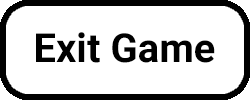
<style>
.page{position:relative;width:250px;height:100px;background:#ffffff}
.page>*{position:absolute;margin:0}
.t1{font:40px "Roboto-Bold";color:#000000}
</style>
<div class="page">
<p class="t1" style="left:36px;top:32px;width:179px;height:31px">Exit Game</p>
</div>
